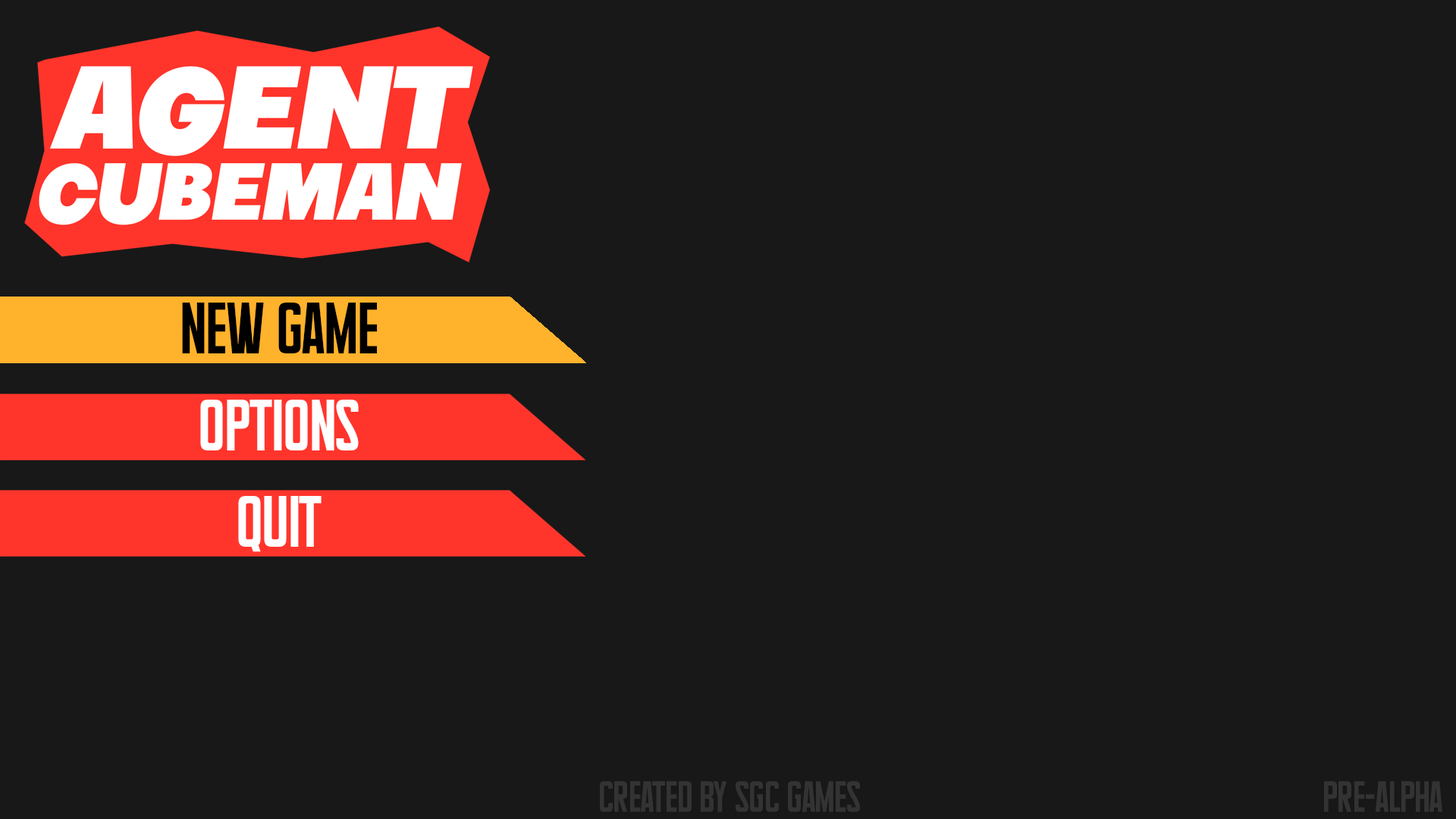
<style>
.page{position:relative;width:1456px;height:819px;background:#181818}
.page>*{position:absolute;margin:0}
.t1{font:49.5px "Supertalls";color:#000000}
.t2{font:49.5px "Supertalls";color:#ffffff}
.t3{font:29.8px "Supertalls";color:#333333}
</style>
<div class="page">
<p class="t1" style="left:182px;top:303px;width:195px;height:50px">new game</p>
<p class="t2" style="left:200px;top:400px;width:159px;height:50px">options</p>
<p class="t2" style="left:238px;top:496px;width:84px;height:56px">Quit</p>
<p class="t3" style="left:600px;top:781px;width:260px;height:31px">Created by sgc games</p>
<p class="t3" style="left:1324px;top:781px;width:118px;height:31px">PRE-ALPHA</p>
</div>
